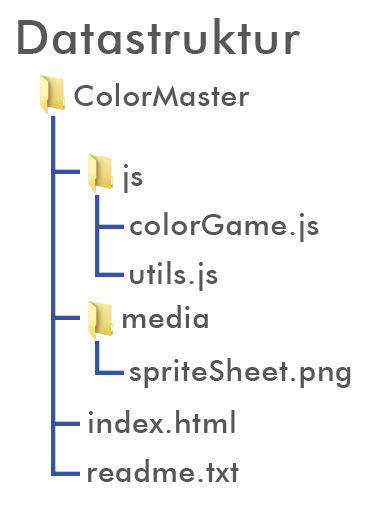
<style>
.page{position:relative;width:377px;height:510px;background:#ffffff}
.page>*{position:absolute;margin:0}
.t1{font:48px "FuturaBT-Medium";letter-spacing:0.025em;color:#575757}
.t2{font:30px "FuturaBT-Medium";letter-spacing:0.025em;color:#575757}
</style>
<div class="page">
<p class="t1" style="left:18px;top:18px;width:283px;height:36px">Datastruktur</p>
<p class="t2" style="left:74px;top:83px;width:176px;height:23px">ColorMaster</p>
<p class="t2" style="left:123px;top:164px;width:20px;height:29px">js</p>
<p class="t2" style="left:130px;top:212px;width:189px;height:30px">colorGame.js</p>
<p class="t2" style="left:130px;top:261px;width:88px;height:30px">utils.js</p>
<p class="t2" style="left:123px;top:305px;width:85px;height:23px">media</p>
<p class="t2" style="left:129px;top:358px;width:222px;height:30px">spriteSheet.png</p>
<p class="t2" style="left:88px;top:410px;width:147px;height:23px">index.html</p>
<p class="t2" style="left:88px;top:459px;width:151px;height:23px">readme.txt</p>
</div>
